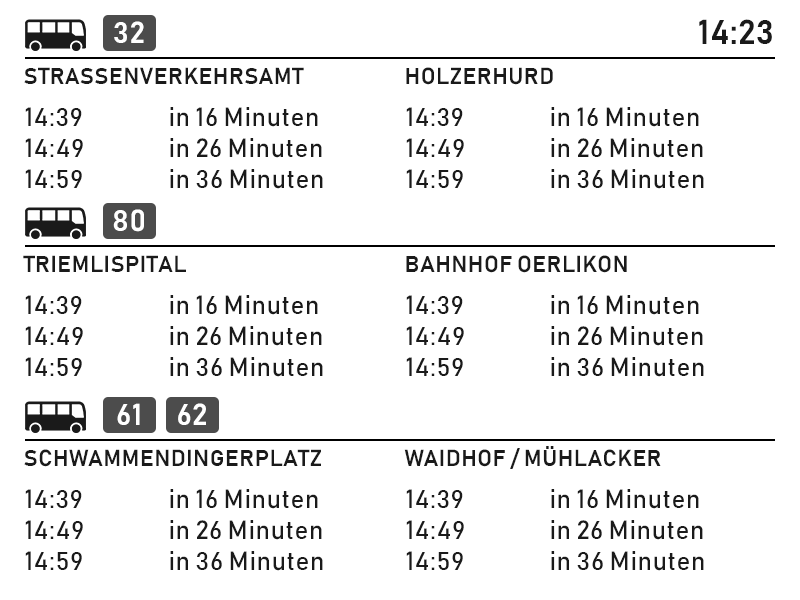
<style>
.page{position:relative;width:800px;height:600px;background:#ffffff}
.page>*{position:absolute;margin:0}
.t1{font:30px "Bahnschrift-SemiBold";letter-spacing:0.02em;color:#ffffff}
.t2{font:34px "Bahnschrift-SemiBold";letter-spacing:0.02em;color:#1a1a1a}
.t3{font:23px "Bahnschrift-SemiBold";letter-spacing:0.02em;color:#1a1a1a}
.t4{font:26px "Bahnschrift";letter-spacing:0.02em;color:#1a1a1a}
</style>
<div class="page">
<p class="t1" style="left:114px;top:21px;width:30px;height:22px">32</p>
<p class="t2" style="left:699px;top:19px;width:73px;height:25px">14:23</p>
<p class="t3" style="left:24px;top:67px;width:280px;height:17px">STRASSENVERKEHRSAMT</p>
<p class="t3" style="left:406px;top:67px;width:147px;height:18px">HOLZERHURD</p>
<p class="t4" style="left:25px;top:107px;width:298px;height:82px">14:39   in 16 Minuten<br>14:49   in 26 Minuten<br>14:59   in 36 Minuten</p>
<p class="t4" style="left:406px;top:107px;width:298px;height:82px">14:39   in 16 Minuten<br>14:49   in 26 Minuten<br>14:59   in 36 Minuten</p>
<p class="t1" style="left:113px;top:209px;width:31px;height:23px">80</p>
<p class="t3" style="left:23px;top:255px;width:163px;height:17px">TRIEMLISPITAL</p>
<p class="t3" style="left:406px;top:255px;width:221px;height:18px">BAHNHOF OERLIKON</p>
<p class="t4" style="left:25px;top:295px;width:298px;height:82px">14:39   in 16 Minuten<br>14:49   in 26 Minuten<br>14:59   in 36 Minuten</p>
<p class="t4" style="left:406px;top:295px;width:298px;height:82px">14:39   in 16 Minuten<br>14:49   in 26 Minuten<br>14:59   in 36 Minuten</p>
<p class="t1" style="left:117px;top:403px;width:23px;height:22px">61</p>
<p class="t1" style="left:178px;top:403px;width:28px;height:22px">62</p>
<p class="t3" style="left:24px;top:449px;width:297px;height:18px">SCHWAMMENDINGERPLATZ</p>
<p class="t3" style="left:404px;top:446px;width:257px;height:23px">WAIDHOF / MÜHLACKER</p>
<p class="t4" style="left:25px;top:489px;width:298px;height:82px">14:39   in 16 Minuten<br>14:49   in 26 Minuten<br>14:59   in 36 Minuten</p>
<p class="t4" style="left:406px;top:489px;width:298px;height:82px">14:39   in 16 Minuten<br>14:49   in 26 Minuten<br>14:59   in 36 Minuten</p>
</div>
